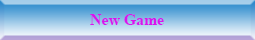
<style>
.page{position:relative;width:255px;height:40px}
.page>*{position:absolute;margin:0}
.t1{font:15.8px "TimesNewRomanPS-BoldMT";color:#d815ed}
</style>
<div class="page">
<p class="t1" style="left:90px;top:14px;width:74px;height:11px">New Game</p>
</div>
